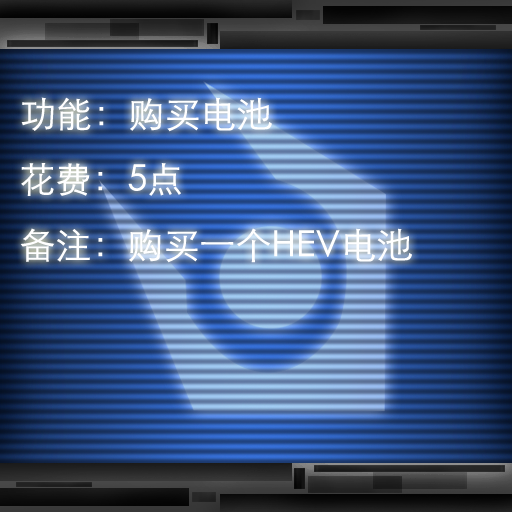
<style>
.page{position:relative;width:512px;height:512px}
.page>*{position:absolute;margin:0}
.t1{font:36px "STXihei";color:#ffffff}
</style>
<div class="page">
<p class="t1" style="left:21px;top:97px;width:251px;height:35px">功能：购买电池</p>
<p class="t1" style="left:21px;top:163px;width:160px;height:33px">花费：5点</p>
<p class="t1" style="left:20px;top:228px;width:392px;height:35px">备注：购买一个HEV电池</p>
</div>
